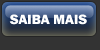
<style>
.page{position:relative;width:100px;height:50px;background:#333333}
.page>*{position:absolute;margin:0}
.t1{font:14px "FranklinGothic-Heavy";color:#ffffff}
</style>
<div class="page">
<p class="t1" style="left:9px;top:14px;width:78px;height:11px">SAIBA MAIS</p>
</div>
